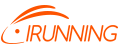
<style>
.page{position:relative;width:120px;height:50px;background:#ffffff}
.page>*{position:absolute;margin:0}
.t1{font:21.1px "Comfortaa";letter-spacing:-0.015em;color:#fd5300;text-transform:uppercase;font-style:italic}
</style>
<div class="page">
<p class="t1" style="left:26px;top:25px;width:92px;height:17px">iRunning</p>
</div>
